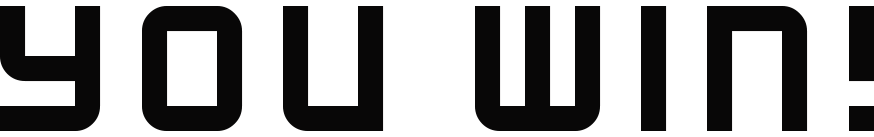
<style>
.page{position:relative;width:874px;height:137px;background:#ffffff}
.page>*{position:absolute;margin:0}
.t1{font:200px "KenVector-Future-Thin";color:#080707}
</style>
<div class="page">
<p class="t1" style="left:0px;top:6px;width:874px;height:125px">You Win!</p>
</div>
